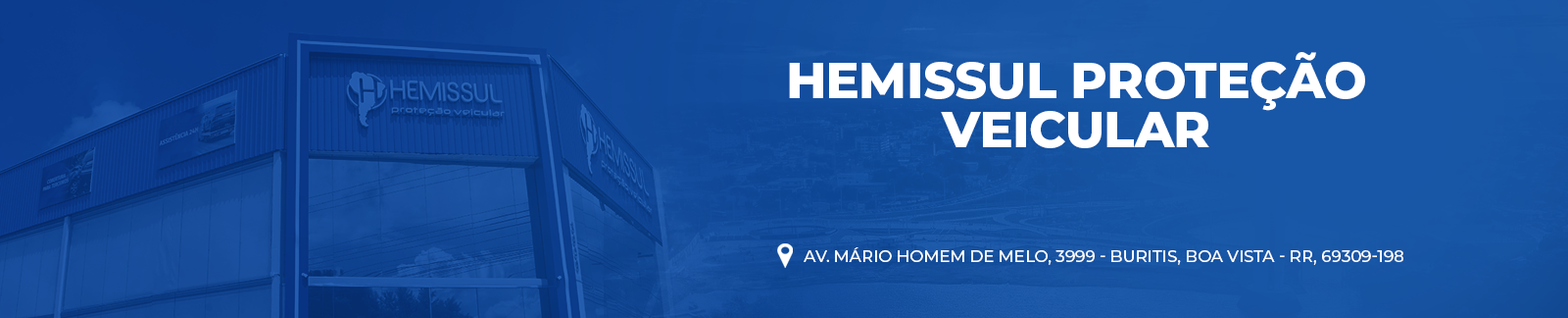
<style>
.page{position:relative;width:1568px;height:318px}
.page>*{position:absolute;margin:0}
.t1{font:50.3px/49px "Montserrat-ExtraBold";letter-spacing:-0.01em;color:#ffffff;text-transform:uppercase}
.t2{font:16.5px "Montserrat-Medium";letter-spacing:-0.01em;color:#ffffff;text-transform:uppercase}
</style>
<div class="page">
<p class="t1" style="left:789px;top:52px;width:576px;height:96px;text-align:center">Hemissul Proteção<br>Veicular</p>
<p class="t2" style="left:804px;top:247px;width:599px;height:18px">Av. Mário Homem de Melo, 3999 - Buritis, Boa Vista - RR, 69309-198</p>
</div>
